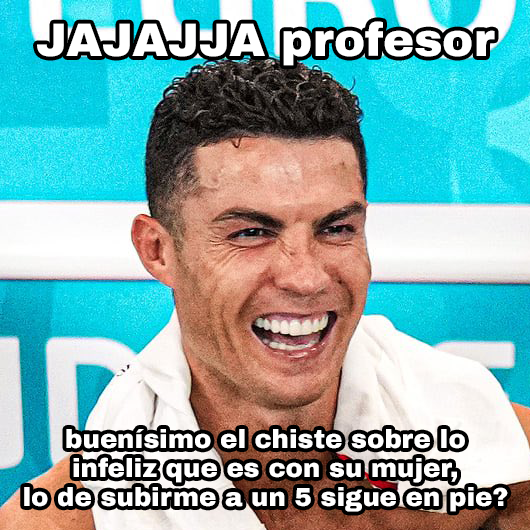
<style>
.page{position:relative;width:530px;height:530px}
.page>*{position:absolute;margin:0}
.t1{font:46.8px "ArchivoBlack-Regular";color:#ffffff}
.t2{font:26.2px "ArchivoBlack-Regular";color:#ffffff}
</style>
<div class="page">
<p class="t1" style="left:37px;top:21px;width:458px;height:45px">JAJAJJA profesor</p>
<p class="t2" style="left:24px;top:429px;width:484px;height:83px;text-align:center">buenísimo el chiste sobre lo<br>infeliz que es con su mujer,<br>lo de subirme a un 5 sigue en pie?</p>
</div>
